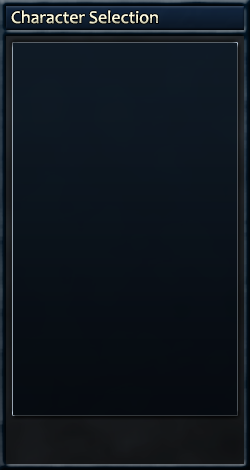
<style>
.page{position:relative;width:250px;height:470px}
.page>*{position:absolute;margin:0}
.t1{font:18px "Candara";color:#fefcdd}
</style>
<div class="page">
<p class="t1" style="left:11px;top:10px;width:147px;height:14px">Character Selection</p>
</div>
